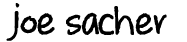
<style>
.page{position:relative;width:187px;height:42px;background:#ffffff}
.page>*{position:absolute;margin:0}
.t1{font:48px "whateverittakes-Bold";color:#000000}
</style>
<div class="page">
<p class="t1" style="left:6px;top:3px;width:14px;height:38px">j</p>
<p class="t1" style="left:20px;top:6px;width:147px;height:29px">oe sacher</p>
</div>
